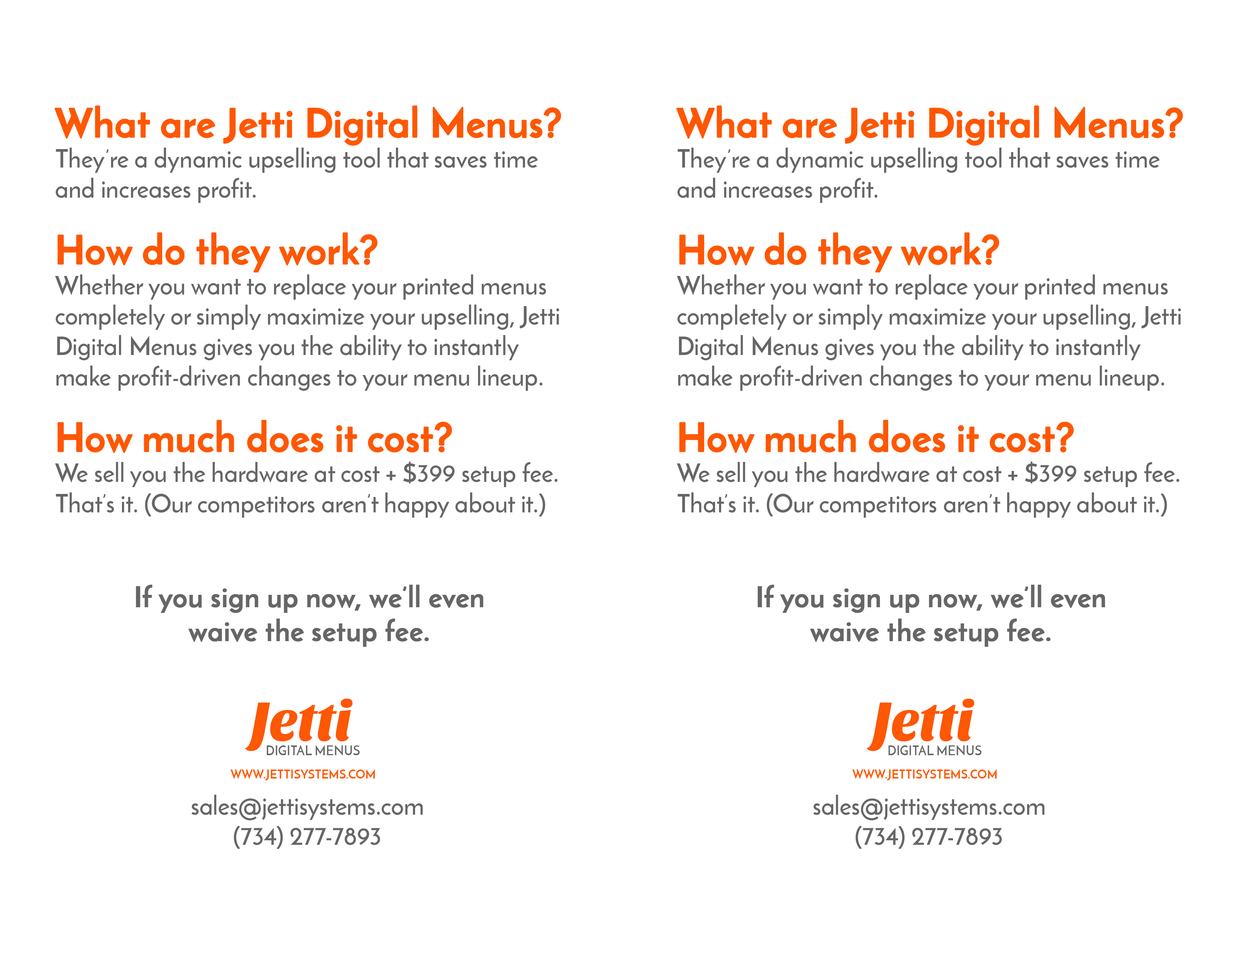
<style>
.page{position:relative;width:1242px;height:960px;background:#ffffff}
.page>*{position:absolute;margin:0}
.t1{font:25.3px "JosefinSans-SemiBold";color:#666666}
.t2{font:39.4px "JosefinSans-Bold";color:#ff5703;font-weight:bold}
.t3{font:28.2px "JosefinSans-Bold";color:#666666;font-weight:bold}
.t4{font:56.7px "SansitaOne";letter-spacing:-0.01em;color:#ff5400;scale:0.95 1}
.t5{font:13.2px "JosefinSans-SemiBold";letter-spacing:0.01em;color:#666666;text-transform:uppercase;scale:0.94 1}
.t6{font:12.3px "JosefinSans-Bold";letter-spacing:0.01em;color:#ff5906;text-transform:uppercase;scale:0.94 1}
.t7{font:25.1px "JosefinSans-SemiBold";color:#666666}
</style>
<div class="page">
<p class="t1" style="left:55px;top:105px;width:506px;height:542px"><span class="t2">What are Jetti Digital Menus?<br></span>They’re a dynamic upselling tool that saves time and increases profit. <br><br><span class="t2">How do they work?<br></span>Whether you want to replace your printed menus completely or simply maximize your upselling, Jetti Digital Menus gives you the ability to instantly make profit-driven changes to your menu lineup. <br><br><span class="t2">How much does it cost?<br></span>We sell you the hardware at cost + $399 setup fee. That’s it. (Our competitors aren’t happy about it.)<br><br><br><span class="t3">If you sign up now, we’ll even<br>waive the setup fee.</span></p>
<p class="t1" style="left:676px;top:105px;width:507px;height:542px"><span class="t2">What are Jetti Digital Menus?<br></span>They’re a dynamic upselling tool that saves time and increases profit. <br><br><span class="t2">How do they work?<br></span>Whether you want to replace your printed menus completely or simply maximize your upselling, Jetti Digital Menus gives you the ability to instantly make profit-driven changes to your menu lineup. <br><br><span class="t2">How much does it cost?<br></span>We sell you the hardware at cost + $399 setup fee. That’s it. (Our competitors aren’t happy about it.)<br><br><br><span class="t3">If you sign up now, we’ll even<br>waive the setup fee.</span></p>
<p class="t4" style="left:245px;top:698px;width:108px;height:53px">Jetti</p>
<p class="t4" style="left:867px;top:698px;width:108px;height:53px">Jetti</p>
<p class="t5" style="left:267px;top:745px;width:93px;height:11px">DIGITAL MENUS</p>
<p class="t5" style="left:888px;top:745px;width:94px;height:11px">DIGITAL MENUS</p>
<p class="t6" style="left:230px;top:769px;width:145px;height:11px">www.jeTtisystems.com</p>
<p class="t6" style="left:852px;top:769px;width:145px;height:11px">www.jeTtisystems.com</p>
<p class="t7" style="left:191px;top:795px;width:232px;height:54px;text-align:center">sales@jettisystems.com<br>(734) 277-7893</p>
<p class="t7" style="left:813px;top:795px;width:232px;height:54px;text-align:center">sales@jettisystems.com<br>(734) 277-7893</p>
</div>
